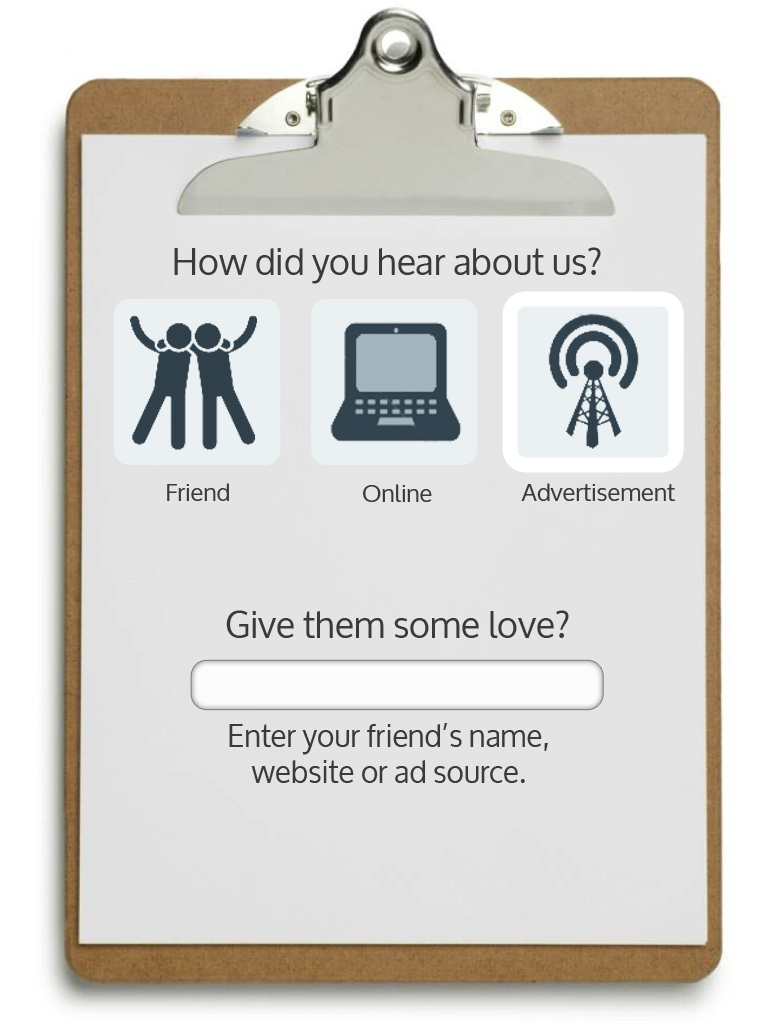
<style>
.page{position:relative;width:768px;height:1024px}
.page>*{position:absolute;margin:0}
.t1{font:36px "Oxygen";color:#3a3a3a}
.t2{font:24px "Oxygen";color:#3a3a3a}
.t3{font:30px "Oxygen";color:#3a3a3a}
</style>
<div class="page">
<p class="t1" style="left:174px;top:247px;width:427px;height:37px">How did you hear about us?</p>
<p class="t2" style="left:167px;top:483px;width:62px;height:18px">Friend</p>
<p class="t2" style="left:363px;top:484px;width:69px;height:18px">Online</p>
<p class="t2" style="left:521px;top:483px;width:154px;height:18px">Advertisement</p>
<p class="t1" style="left:226px;top:610px;width:343px;height:28px">Give them some love?</p>
<p class="t3" style="left:229px;top:723px;width:319px;height:60px;text-align:center">Enter your friend’s name,<br>website or ad source.</p>
</div>
